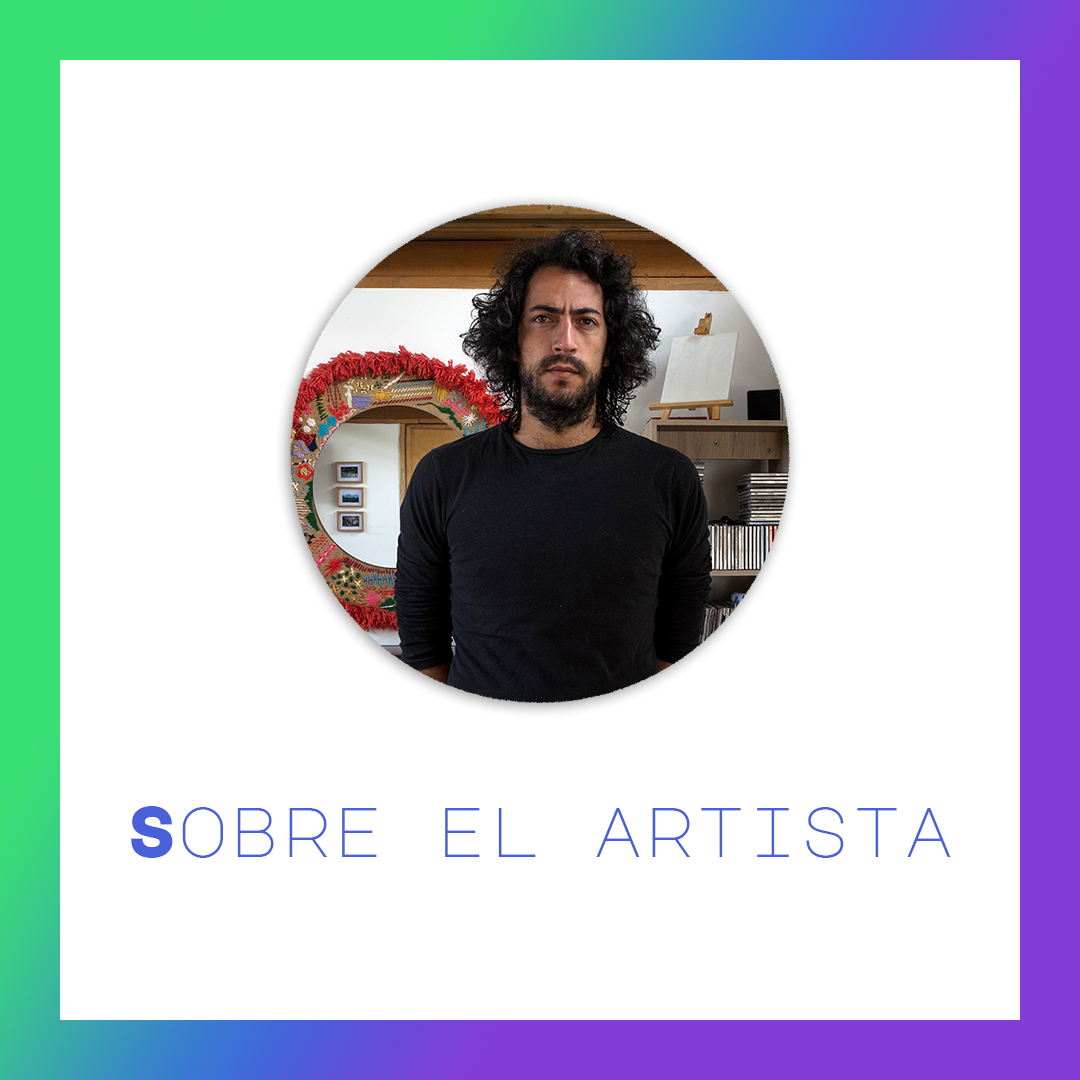
<style>
.page{position:relative;width:1080px;height:1080px;background:#ffffff}
.page>*{position:absolute;margin:0}
.t1{font:70px "MajorMonoDisplay-Regular";color:#4960d8}
</style>
<div class="page">
<p class="t1" style="left:131px;top:806px;width:820px;height:52px">Sobre el artista</p>
</div>
